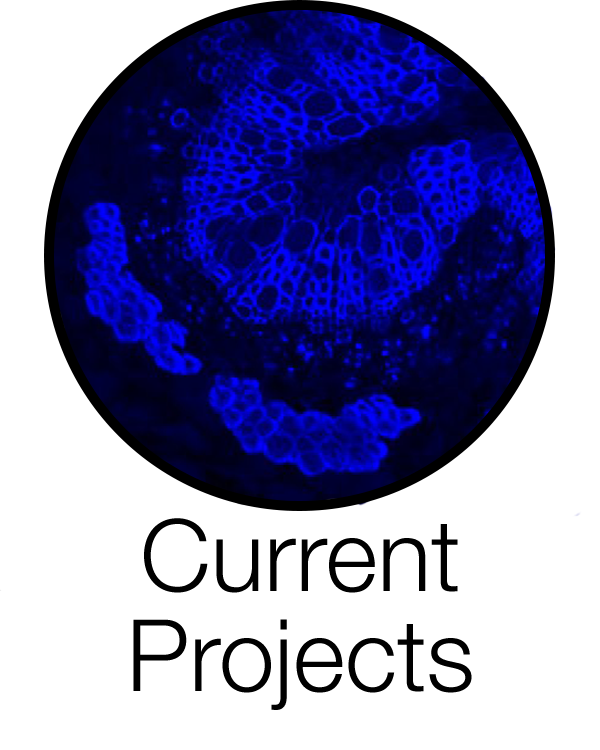
<style>
.page{position:relative;width:600px;height:750px;background:#ffffff}
.page>*{position:absolute;margin:0}
.t1{font:100px/100px "HelveticaNeue-Light";color:#000000}
</style>
<div class="page">
<p class="t1" style="left:133px;top:518px;width:339px;height:192px;text-align:center">Current<br>Projects</p>
</div>
